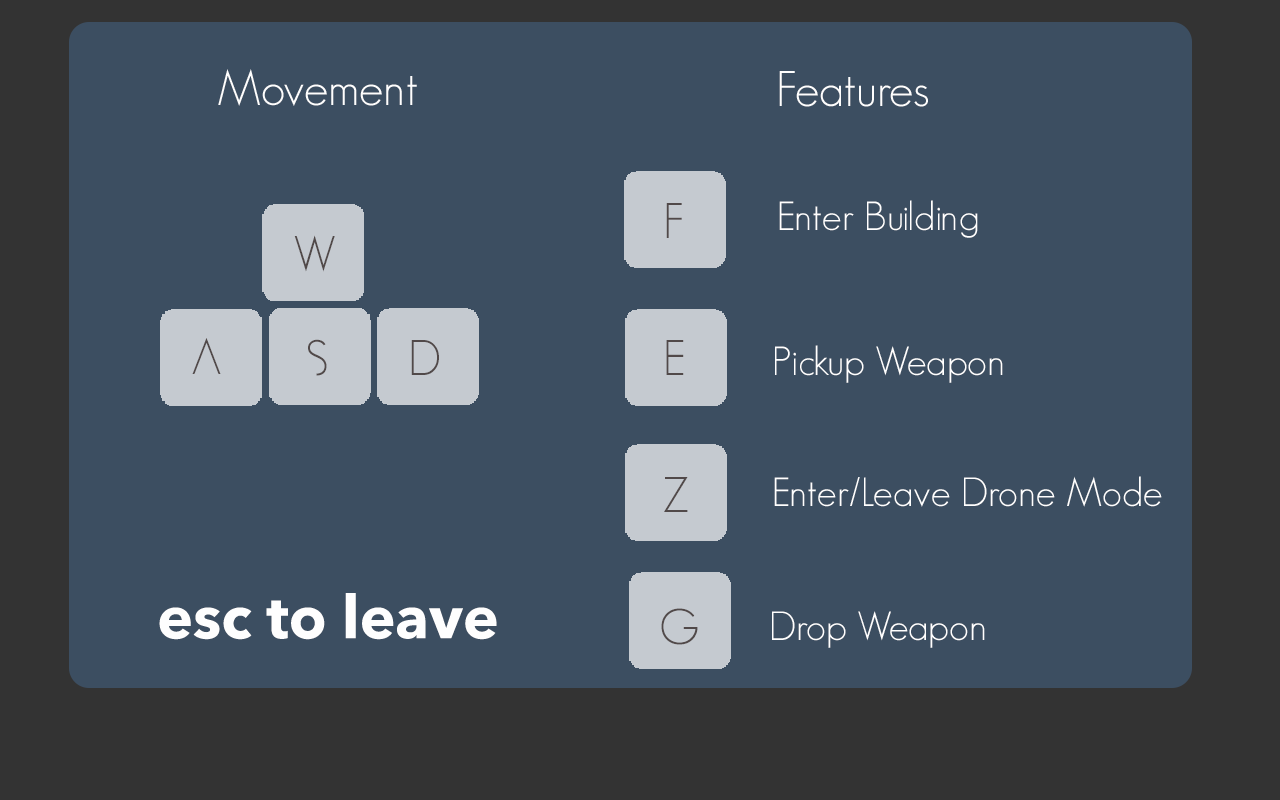
<style>
.page{position:relative;width:1280px;height:800px;background:#3c4e61}
.page>*{position:absolute;margin:0}
.t1{font:49px "GeosansLight-NMS";color:#fefefe}
.t2{font:49px "GeosansLight-NMS";color:#514949}
.t3{font:40px "GeosansLight-NMS";color:#ffffff}
.t4{font:60px "AvenirNext-Bold";color:#fefefe}
</style>
<div class="page">
<p class="t1" style="left:218px;top:69px;width:199px;height:37px">Movement</p>
<p class="t1" style="left:779px;top:71px;width:149px;height:36px">Features</p>
<p class="t2" style="left:666px;top:203px;width:16px;height:35px">F</p>
<p class="t3" style="left:779px;top:200px;width:199px;height:38px">Enter Building</p>
<p class="t2" style="left:294px;top:235px;width:41px;height:37px">W</p>
<p class="t2" style="left:192px;top:338px;width:29px;height:36px">A</p>
<p class="t2" style="left:308px;top:339px;width:19px;height:37px">S</p>
<p class="t2" style="left:411px;top:340px;width:28px;height:35px">D</p>
<p class="t2" style="left:666px;top:340px;width:18px;height:35px">E</p>
<p class="t3" style="left:775px;top:345px;width:228px;height:38px">Pickup Weapon</p>
<p class="t2" style="left:664px;top:477px;width:24px;height:35px">Z</p>
<p class="t3" style="left:774px;top:476px;width:388px;height:31px">Enter/Leave Drone Mode</p>
<p class="t4" style="left:159px;top:593px;width:338px;height:47px">esc to leave</p>
<p class="t2" style="left:661px;top:608px;width:37px;height:37px">G</p>
<p class="t3" style="left:772px;top:611px;width:213px;height:37px">Drop Weapon</p>
</div>
